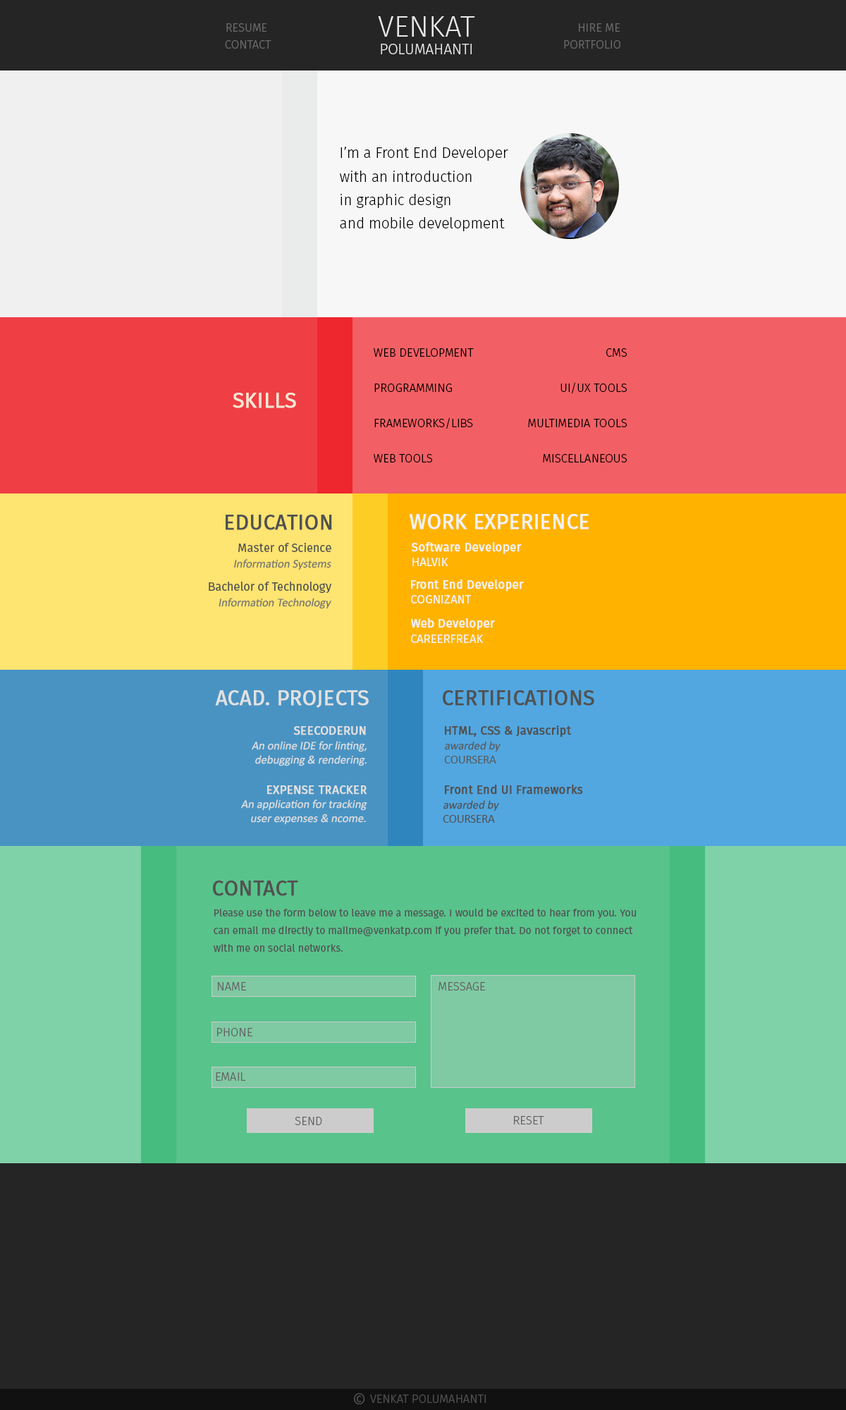
<style>
.page{position:relative;width:846px;height:1410px;background:#252525}
.page>*{position:absolute;margin:0}
.t1{font:14.7px "FiraSans-Light";color:#e9e9e9;text-transform:uppercase}
.t2{font:29.4px "FiraSans-Light";color:#e9e9e9;text-transform:uppercase}
.t3{font:11.7px "FiraSans-Light";color:#6b6a6a;text-transform:uppercase}
.t4{font:14.7px/23.5px "FiraSans-Light";color:#000000}
.t5{font:11.7px/35.2px "FiraSans-Light";color:#000000;text-transform:uppercase}
.t6{font:20.6px "FiraSans-Regular";color:#f5e7d3;font-weight:bold}
.t7{font:20.6px "FiraSans-Regular";color:#515151;text-transform:uppercase;font-weight:bold}
.t8{font:20.6px "FiraSans-Regular";color:#f2f2f2;text-transform:uppercase;font-weight:bold}
.t9{font:11.7px "FiraSans-Regular";color:#515151}
.t10{font:11.7px "FiraSans-Regular";color:#f2f2f2;font-weight:bold}
.t11{font:11.7px "FiraSans-Regular";color:#f2f2f2}
.t12{font:11.7px "Calibri";color:#717171;font-style:italic}
.t13{font:20.6px "FiraSans-Regular";color:#e1e1e1;font-weight:bold}
.t14{font:20.6px "FiraSans-Regular";color:#515151;font-weight:bold}
.t15{font:11.7px "FiraSans-Regular";color:#515151;font-weight:bold}
.t16{font:11.7px "FiraSans-Regular";color:#e1e1e1;text-transform:uppercase;font-weight:bold}
.t17{font:11.7px "Calibri";color:#e1e1e1;font-style:italic}
.t18{font:11.7px "Calibri";color:#595959;font-style:italic}
.t19{font:11.7px "Calibri";color:#595959}
.t20{font:11.7px "Calibri";color:#515151;font-style:italic}
.t21{font:11.7px "Calibri";color:#515151;text-transform:uppercase}
.t22{font:10.3px/17.6px "FiraSans-Regular";color:#515354}
.t23{font:11.7px "FiraSans-Light";color:#626262}
.t24{font:17.6px "FiraSans-Light";color:#5d5757}
.t25{font:11.7px "FiraSans-Light";color:#505050}
</style>
<div class="page">
<p class="t1" style="left:378px;top:16px;width:97px;height:38px;text-align:center"><span class="t2">Venkat<br></span>POLUMAHANTI</p>
<p class="t3" style="left:226px;top:23px;width:41px;height:9px">RESUME</p>
<p class="t3" style="left:579px;top:23px;width:41px;height:9px">HIRE ME</p>
<p class="t3" style="left:225px;top:40px;width:46px;height:9px">contact</p>
<p class="t3" style="left:564px;top:40px;width:56px;height:9px">portfolio</p>
<p class="t4" style="left:340px;top:147px;width:168px;height:84px">I’m a Front End Developer with an introduction <br>in graphic design<br>and mobile development</p>
<p class="t5" style="left:374px;top:348px;width:100px;height:114px">Web development<br>Programming <br>Frameworks/Libs<br>Web Tools</p>
<p class="t5" style="left:528px;top:348px;width:99px;height:114px;text-align:right">CMS<br>UI/UX Tools<br>Multimedia Tools<br>Miscellaneous</p>
<p class="t6" style="left:233px;top:393px;width:63px;height:15px">SKILLS</p>
<p class="t7" style="left:226px;top:515px;width:106px;height:15px">education</p>
<p class="t8" style="left:410px;top:514px;width:179px;height:15px">WORK EXPERIENCE</p>
<p class="t9" style="left:238px;top:543px;width:93px;height:9px">Master of Science</p>
<p class="t10" style="left:411px;top:542px;width:111px;height:12px">Software Developer</p>
<p class="t11" style="left:412px;top:558px;width:36px;height:8px">HALVIK</p>
<p class="t12" style="left:234px;top:559px;width:97px;height:11px">Information Systems</p>
<p class="t9" style="left:209px;top:582px;width:122px;height:11px">Bachelor of Technology</p>
<p class="t10" style="left:411px;top:579px;width:113px;height:12px">Front End Developer</p>
<p class="t12" style="left:219px;top:598px;width:112px;height:11px">Information Technology</p>
<p class="t11" style="left:411px;top:595px;width:60px;height:8px">COGNIZANT</p>
<p class="t10" style="left:410px;top:618px;width:85px;height:12px">Web Developer</p>
<p class="t11" style="left:411px;top:634px;width:73px;height:9px">CAREERFREAK</p>
<p class="t13" style="left:215px;top:690px;width:154px;height:18px">ACAD. PROJECTS</p>
<p class="t14" style="left:443px;top:690px;width:151px;height:16px">CERTIFICATIONS</p>
<p class="t15" style="left:445px;top:725px;width:127px;height:12px">HTML, CSS &amp; Javascript</p>
<p class="t16" style="left:293px;top:726px;width:73px;height:9px">SeeCodeRun</p>
<p class="t17" style="left:252px;top:741px;width:115px;height:25px;text-align:right">An online IDE for linting, <br>debugging &amp; rendering.</p>
<p class="t18" style="left:444px;top:741px;width:56px;height:22px">awarded by <br><span class="t19">COURSERA</span></p>
<p class="t16" style="left:267px;top:785px;width:100px;height:9px">Expense Tracker</p>
<p class="t15" style="left:445px;top:785px;width:138px;height:9px">Front End UI Frameworks</p>
<p class="t17" style="left:241px;top:799px;width:126px;height:26px;text-align:right">An application for tracking<br>user expenses &amp; ncome.</p>
<p class="t20" style="left:443px;top:800px;width:56px;height:23px">awarded by <br><span class="t21">Coursera</span></p>
<p class="t14" style="left:213px;top:880px;width:85px;height:16px">CONTACT</p>
<p class="t22" style="left:214px;top:909px;width:422px;height:43px">Please use the form below to leave me a message. I would be excited to hear from you. You <br>can email me directly to mailme@venkatp.com if you prefer that. Do not forget to connect <br>with me on social networks.</p>
<p class="t23" style="left:218px;top:982px;width:28px;height:8px">NAME</p>
<p class="t23" style="left:438px;top:982px;width:47px;height:8px">MESSAGE</p>
<p class="t23" style="left:217px;top:1028px;width:35px;height:8px">PHONE</p>
<p class="t23" style="left:216px;top:1072px;width:29px;height:9px">EMAIL</p>
<p class="t23" style="left:295px;top:1117px;width:27px;height:8px">SEND</p>
<p class="t23" style="left:514px;top:1116px;width:30px;height:8px">RESET</p>
<p class="t24" style="left:354px;top:1393px;width:10px;height:11px">©</p>
<p class="t25" style="left:370px;top:1394px;width:116px;height:9px">VENKAT POLUMAHANTI</p>
</div>
